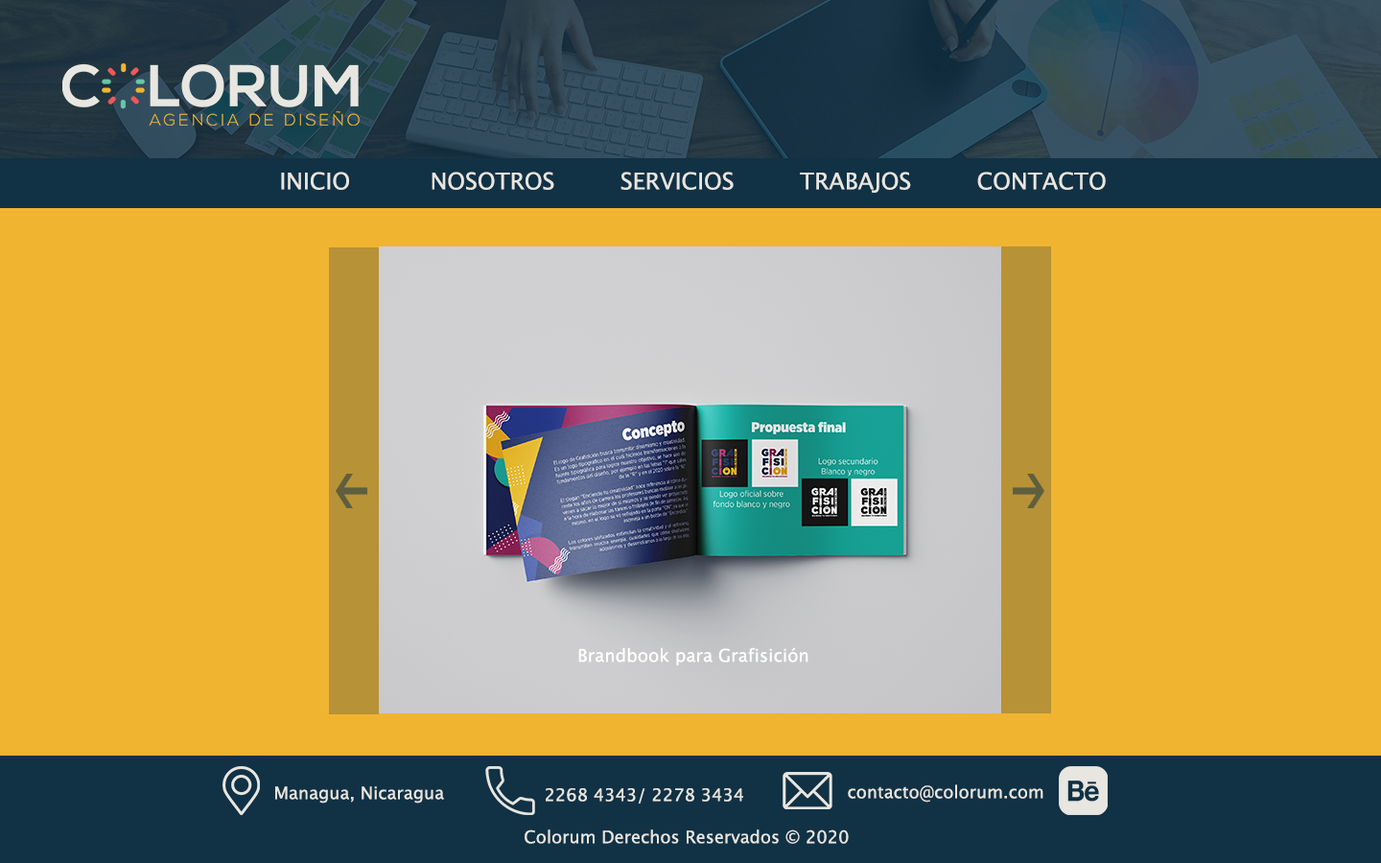
<style>
.page{position:relative;width:1381px;height:863px;background:#f1b431}
.page>*{position:absolute;margin:0}
.t1{font:23px "LucidaGrande";color:#e8e6e0}
.t2{font:17.6px "LucidaGrande";color:#fffffe}
.t3{font:17.3px "LucidaGrande";color:#e8e6e0}
</style>
<div class="page">
<p class="t1" style="left:281px;top:172px;width:825px;height:21px">INICIO           NOSOTROS         SERVICIOS         TRABAJOS         CONTACTO</p>
<p class="t2" style="left:578px;top:647px;width:231px;height:19px">Brandbook para Grafisición</p>
<p class="t3" style="left:848px;top:785px;width:196px;height:18px">contacto@colorum.com</p>
<p class="t3" style="left:275px;top:787px;width:169px;height:17px">Managua, Nicaragua</p>
<p class="t3" style="left:546px;top:788px;width:197px;height:16px">2268 4343/ 2278 3434</p>
<p class="t3" style="left:525px;top:830px;width:324px;height:14px">Colorum Derechos Reservados © 2020</p>
</div>
